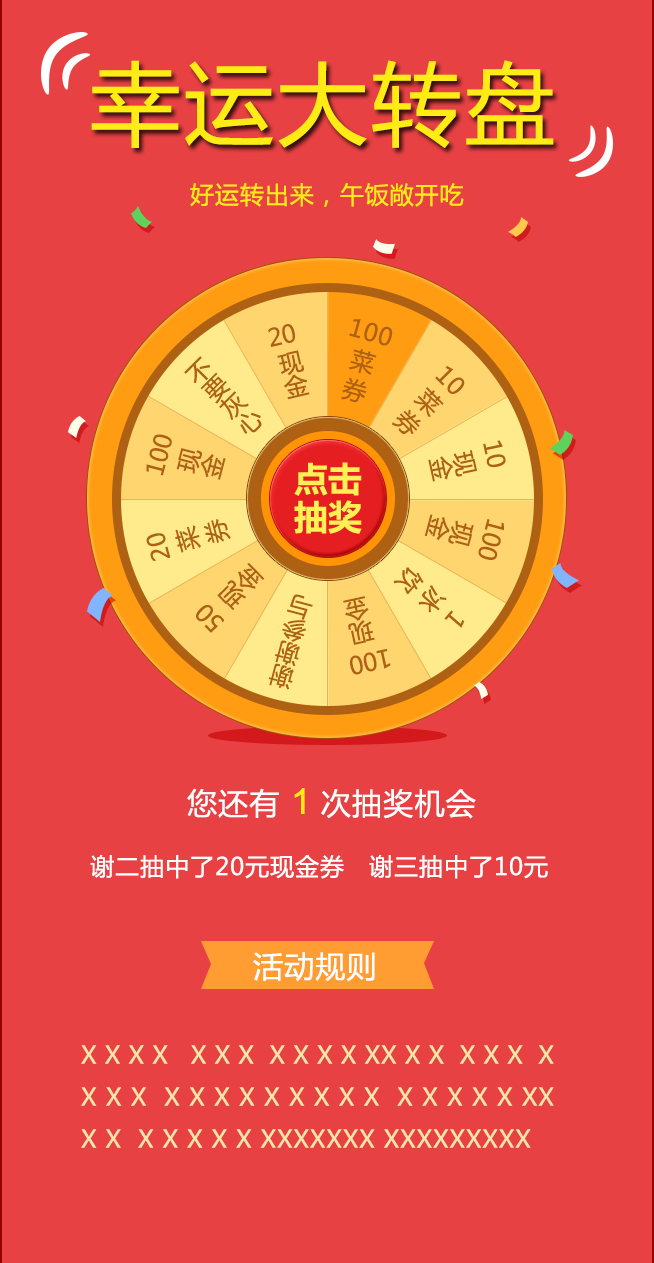
<style>
.page{position:relative;width:654px;height:1263px;background:#e84144}
.page>*{position:absolute;margin:0}
.t1{font:90px "MicrosoftYaHei";letter-spacing:0.04em;color:#ffec14}
.t2{font:24px "MicrosoftYaHei";letter-spacing:0.04em;color:#ffec14}
.t3{font:24px "MicrosoftYaHei";color:#ae6112}
.t4{font:24px/30px "MicrosoftYaHei";letter-spacing:0.04em;color:#ae6112}
.t5{font:24px "MicrosoftYaHei";letter-spacing:0.04em;color:#ae6112}
.t6{font:34px/38px "MicrosoftYaHei-Bold";color:#fff153}
.t7{font:30px "MicrosoftYaHei";letter-spacing:0.04em;color:#ffffff}
.t8{font:36px "ArialMT";letter-spacing:0.04em;color:#ffec14}
.t9{font:24px "MicrosoftYaHei";letter-spacing:0.04em;color:#ffffff}
.t10{font:24px "MicrosoftYaHei";letter-spacing:0.04em;color:#ffe5aa}
</style>
<div class="page">
<p class="t1" style="left:91px;top:60px;width:463px;height:88px">幸运大转盘</p>
<p class="t2" style="left:190px;top:183px;width:274px;height:24px">好运转出来，午饭敞开吃</p>
<p class="t3" style="left:268px;top:324px;width:27px;height:23px;rotate:-13deg">20</p>
<p class="t4" style="left:341px;top:319px;width:52px;height:84px;text-align:center;rotate:16deg">100菜<br>券</p>
<p class="t3" style="left:277px;top:350px;width:33px;height:50px;rotate:-13deg">现金</p>
<p class="t3" style="left:184px;top:356px;width:78px;height:78px;rotate:-45deg">不要灰心</p>
<p class="t5" style="left:392px;top:366px;width:73px;height:68px;rotate:45deg">10菜券</p>
<p class="t3" style="left:146px;top:434px;width:26px;height:42px;rotate:-75deg">100</p>
<p class="t3" style="left:176px;top:448px;width:50px;height:32px;rotate:-75deg">现金</p>
<p class="t3" style="left:483px;top:440px;width:23px;height:28px;rotate:78deg">10</p>
<p class="t6" style="left:294px;top:462px;width:68px;height:72px;text-align:justify">点击<br>抽奖</p>
<p class="t3" style="left:428px;top:450px;width:49px;height:32px;rotate:78deg">现金</p>
<p class="t5" style="left:146px;top:519px;width:85px;height:42px;rotate:-105deg">20菜券</p>
<p class="t3" style="left:424px;top:514px;width:50px;height:33px;rotate:105deg">现金</p>
<p class="t3" style="left:478px;top:519px;width:26px;height:41px;rotate:105deg">100</p>
<p class="t3" style="left:217px;top:562px;width:48px;height:48px;rotate:-134deg">现金</p>
<p class="t5" style="left:393px;top:567px;width:72px;height:61px;rotate:131deg">1冰饮</p>
<p class="t3" style="left:196px;top:605px;width:29px;height:28px;rotate:-134deg">50</p>
<p class="t3" style="left:268px;top:594px;width:45px;height:96px;rotate:-165deg">谢谢参与</p>
<p class="t3" style="left:343px;top:596px;width:32px;height:49px;rotate:168deg">现金</p>
<p class="t3" style="left:350px;top:649px;width:41px;height:26px;rotate:168deg">100</p>
<p class="t7" style="left:187px;top:788px;width:289px;height:31px">您还有    次抽奖机会</p>
<p class="t8" style="left:294px;top:788px;width:11px;height:26px">1</p>
<p class="t9" style="left:90px;top:854px;width:458px;height:25px">谢二抽中了20元现金券   谢三抽中了10元</p>
<p class="t7" style="left:253px;top:952px;width:122px;height:30px">活动规则</p>
<p class="t10" style="left:81px;top:1045px;width:473px;height:103px;text-align:justify">X X X X   X X X  X X X X XX X X  X X X  X X X X  X X X X X X X X X  X X X X X XX X X  X X X X X XXXXXXX XXXXXXXXX</p>
</div>
